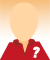
<style>
.page{position:relative;width:50px;height:60px;background:#ffd6a4}
.page>*{position:absolute;margin:0}
.t1{font:14px "HelveticaLTStd-BlkCond";color:#ffffff;text-transform:uppercase}
</style>
<div class="page">
<p class="t1" style="left:33px;top:46px;width:7px;height:12px;rotate:10deg">?</p>
</div>
